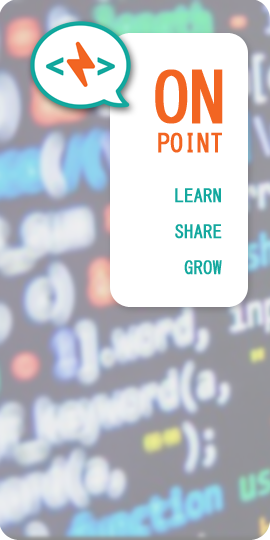
<style>
.page{position:relative;width:270px;height:540px;background:#ffffff}
.page>*{position:absolute;margin:0}
.t1{font:69.5px "MS-Gothic";color:#f26522;text-transform:uppercase;font-weight:bold}
.t2{font:25px "MS-Gothic";color:#f26522;text-transform:uppercase;font-weight:bold}
.t3{font:18px/36px "MS-Gothic";color:#13a89e;text-transform:uppercase;font-weight:bold}
</style>
<div class="page">
<p class="t1" style="left:155px;top:69px;width:68px;height:55px">ON</p>
<p class="t2" style="left:158px;top:132px;width:64px;height:21px">POINT</p>
<p class="t3" style="left:175px;top:188px;width:47px;height:87px;text-align:right">LEARN<br>Share<br>Grow</p>
</div>
